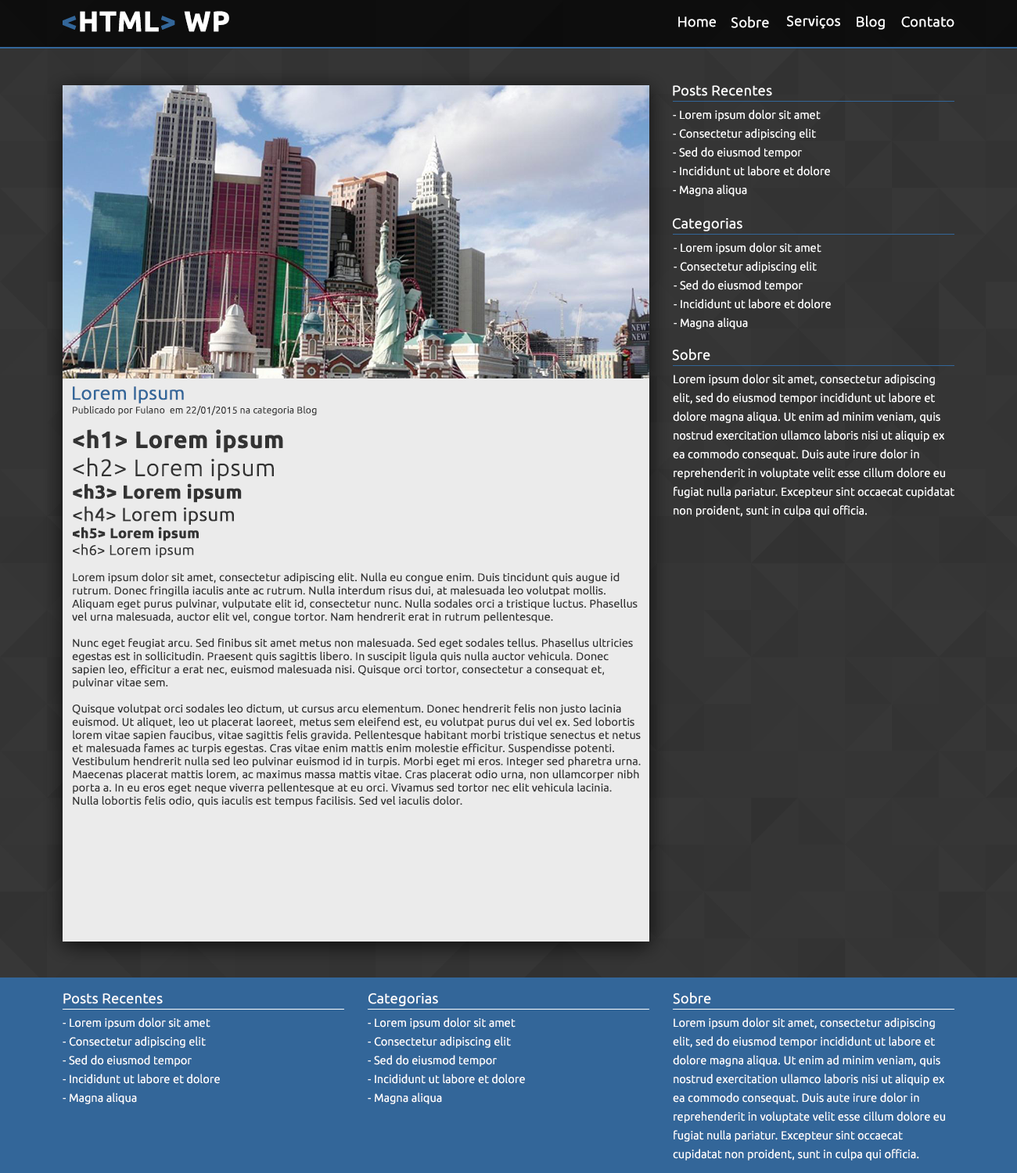
<style>
.page{position:relative;width:1017px;height:1173px}
.page>*{position:absolute;margin:0}
.t1{font:28.2px "Ubuntu-Bold";color:#ffffff;font-weight:bold}
.t2{font:28.2px "Ubuntu-Bold";color:#336699;font-weight:bold}
.t3{font:14.1px "Ubuntu-Light";color:#ffffff;font-weight:bold}
.t4{font:11.4px/18.8px "Ubuntu-Light";color:#ffffff;font-weight:bold;scale:0.96 1}
.t5{font:18.8px "Ubuntu-Light";color:#336699;font-weight:bold}
.t6{font:9.4px "Ubuntu-Light";color:#333333;font-weight:bold}
.t7{font:10.9px "Ubuntu-Light";color:#333333;font-weight:bold}
.t8{font:23.5px "Ubuntu-Bold";color:#333333;font-weight:bold}
.t9{font:23.5px "Ubuntu-Light";color:#333333;font-weight:bold}
.t10{font:18.8px "Ubuntu-Bold";color:#333333;font-weight:bold}
.t11{font:18.8px "Ubuntu-Light";color:#333333;font-weight:bold}
.t12{font:14.1px "Ubuntu-Bold";color:#333333;font-weight:bold}
.t13{font:14.1px "Ubuntu-Light";color:#333333;font-weight:bold}
</style>
<div class="page">
<p class="t1" style="left:63px;top:11px;width:166px;height:21px"><span class="t2">&lt;</span>HTML<span class="t2">&gt;</span> WP</p>
<p class="t3" style="left:678px;top:16px;width:38px;height:11px">Home</p>
<p class="t3" style="left:731px;top:16px;width:38px;height:12px">Sobre</p>
<p class="t3" style="left:787px;top:16px;width:53px;height:13px">Serviços</p>
<p class="t3" style="left:856px;top:16px;width:28px;height:14px">Blog</p>
<p class="t3" style="left:901px;top:16px;width:53px;height:11px">Contato</p>
<p class="t3" style="left:673px;top:85px;width:99px;height:11px">Posts Recentes</p>
<p class="t4" style="left:673px;top:109px;width:157px;height:87px">- Lorem ipsum dolor sit amet<br>- Consectetur adipiscing elit<br>- Sed do eiusmod tempor<br>- Incididunt ut labore et dolore<br>- Magna aliqua</p>
<p class="t3" style="left:673px;top:218px;width:69px;height:13px">Categorias</p>
<p class="t4" style="left:673px;top:242px;width:157px;height:87px">- Lorem ipsum dolor sit amet<br>- Consectetur adipiscing elit<br>- Sed do eiusmod tempor<br>- Incididunt ut labore et dolore<br>- Magna aliqua</p>
<p class="t3" style="left:672px;top:349px;width:38px;height:11px">Sobre</p>
<p class="t4" style="left:673px;top:374px;width:281px;height:143px">Lorem ipsum dolor sit amet, consectetur adipiscing elit, sed do eiusmod tempor incididunt ut labore et dolore magna aliqua. Ut enim ad minim veniam, quis nostrud exercitation ullamco laboris nisi ut aliquip ex ea commodo consequat. Duis aute irure dolor in reprehenderit in voluptate velit esse cillum dolore eu fugiat nulla pariatur. Excepteur sint occaecat cupidatat non proident, sunt in culpa qui officia.</p>
<p class="t5" style="left:73px;top:386px;width:111px;height:18px">Lorem Ipsum</p>
<p class="t6" style="left:73px;top:406px;width:244px;height:9px">Publicado por Fulano  em 22/01/2015 na categoria Blog</p>
<p class="t7" style="left:72px;top:429px;width:568px;height:378px"><span class="t8">&lt;h1&gt; Lorem ipsum<br></span><span class="t9">&lt;h2&gt; Lorem ipsum<br></span><span class="t10">&lt;h3&gt; Lorem ipsum<br></span><span class="t11">&lt;h4&gt; Lorem ipsum<br></span><span class="t12">&lt;h5&gt; Lorem ipsum<br></span><span class="t13">&lt;h6&gt; Lorem ipsum<br></span><br>Lorem ipsum dolor sit amet, consectetur adipiscing elit. Nulla eu congue enim. Duis tincidunt quis augue id rutrum. Donec fringilla iaculis ante ac rutrum. Nulla interdum risus dui, at malesuada leo volutpat mollis. Aliquam eget purus pulvinar, vulputate elit id, consectetur nunc. Nulla sodales orci a tristique luctus. Phasellus vel urna malesuada, auctor elit vel, congue tortor. Nam hendrerit erat in rutrum pellentesque.<br><br>Nunc eget feugiat arcu. Sed finibus sit amet metus non malesuada. Sed eget sodales tellus. Phasellus ultricies egestas est in sollicitudin. Praesent quis sagittis libero. In suscipit ligula quis nulla auctor vehicula. Donec sapien leo, efficitur a erat nec, euismod malesuada nisi. Quisque orci tortor, consectetur a consequat et, pulvinar vitae sem.<br><br>Quisque volutpat orci sodales leo dictum, ut cursus arcu elementum. Donec hendrerit felis non justo lacinia euismod. Ut aliquet, leo ut placerat laoreet, metus sem eleifend est, eu volutpat purus dui vel ex. Sed lobortis lorem vitae sapien faucibus, vitae sagittis felis gravida. Pellentesque habitant morbi tristique senectus et netus et malesuada fames ac turpis egestas. Cras vitae enim mattis enim molestie efficitur. Suspendisse potenti. Vestibulum hendrerit nulla sed leo pulvinar euismod id in turpis. Morbi eget mi eros. Integer sed pharetra urna. Maecenas placerat mattis lorem, ac maximus massa mattis vitae. Cras placerat odio urna, non ullamcorper nibh porta a. In eu eros eget neque viverra pellentesque at eu orci. Vivamus sed tortor nec elit vehicula lacinia. Nulla lobortis felis odio, quis iaculis est tempus facilisis. Sed vel iaculis dolor.</p>
<p class="t3" style="left:63px;top:993px;width:100px;height:11px">Posts Recentes</p>
<p class="t3" style="left:368px;top:993px;width:70px;height:13px">Categorias</p>
<p class="t3" style="left:673px;top:992px;width:38px;height:12px">Sobre</p>
<p class="t4" style="left:63px;top:1017px;width:157px;height:87px">- Lorem ipsum dolor sit amet<br>- Consectetur adipiscing elit<br>- Sed do eiusmod tempor<br>- Incididunt ut labore et dolore<br>- Magna aliqua</p>
<p class="t4" style="left:368px;top:1017px;width:157px;height:87px">- Lorem ipsum dolor sit amet<br>- Consectetur adipiscing elit<br>- Sed do eiusmod tempor<br>- Incididunt ut labore et dolore<br>- Magna aliqua</p>
<p class="t4" style="left:673px;top:1017px;width:272px;height:143px">Lorem ipsum dolor sit amet, consectetur adipiscing elit, sed do eiusmod tempor incididunt ut labore et dolore magna aliqua. Ut enim ad minim veniam, quis nostrud exercitation ullamco laboris nisi ut aliquip ex ea commodo consequat. Duis aute irure dolor in reprehenderit in voluptate velit esse cillum dolore eu fugiat nulla pariatur. Excepteur sint occaecat cupidatat non proident, sunt in culpa qui officia.</p>
</div>
